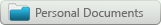
<style>
.page{position:relative;width:161px;height:25px}
.page>*{position:absolute;margin:0}
.t1{font:12px "SegoeUI";color:#706d6d}
</style>
<div class="page">
<p class="t1" style="left:36px;top:8px;width:107px;height:9px">Personal Documents</p>
</div>
